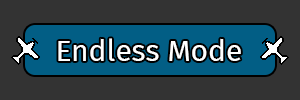
<style>
.page{position:relative;width:300px;height:100px;background:#333333}
.page>*{position:absolute;margin:0}
.t1{font:30px "FiraSans-Regular";color:#ffffff}
</style>
<div class="page">
<p class="t1" style="left:58px;top:38px;width:183px;height:23px">Endless Mode</p>
</div>
